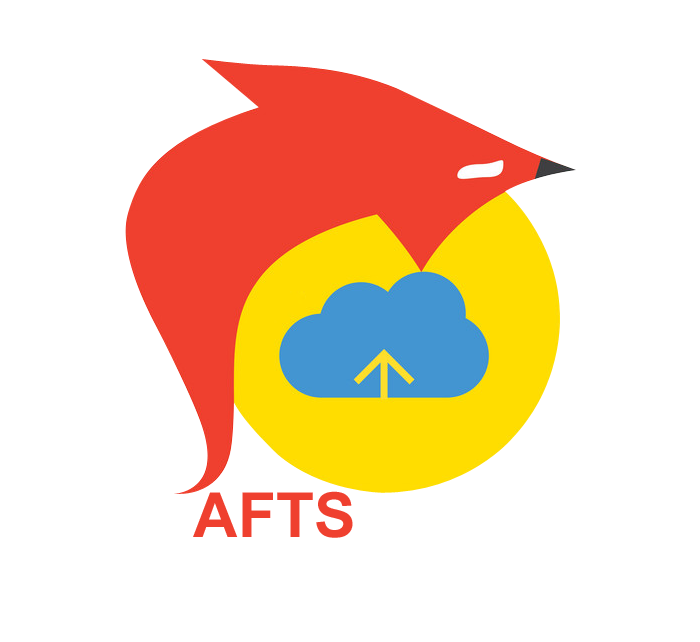
<style>
.page{position:relative;width:700px;height:642px;background:#ffffff}
.page>*{position:absolute;margin:0}
.t1{font:62.2px "Arial-BoldMT";color:#ef402f}
</style>
<div class="page">
<p class="t1" style="left:193px;top:491px;width:160px;height:47px">AFTS</p>
</div>
